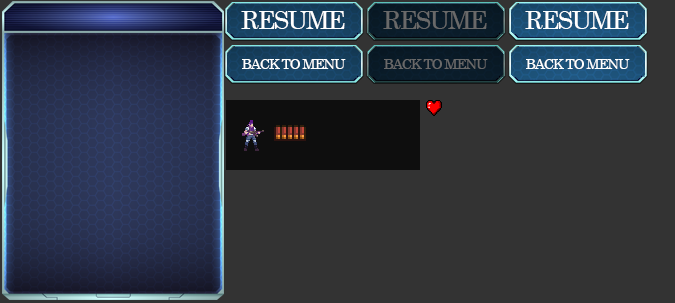
<style>
.page{position:relative;width:675px;height:303px;background:#333333}
.page>*{position:absolute;margin:0}
.t1{font:25px "Century";letter-spacing:-0.075em;color:#ffffff}
.t2{font:25px "Century";letter-spacing:-0.075em;color:#696969}
.t3{font:14px "Century";letter-spacing:-0.075em;color:#ffffff}
.t4{font:14px "Century";letter-spacing:-0.075em;color:#696969}
</style>
<div class="page">
<p class="t1" style="left:241px;top:11px;width:104px;height:18px">RESUME</p>
<p class="t2" style="left:383px;top:11px;width:104px;height:18px">RESUME</p>
<p class="t1" style="left:525px;top:11px;width:104px;height:18px">RESUME</p>
<p class="t3" style="left:242px;top:59px;width:104px;height:10px">BACK TO MENU</p>
<p class="t4" style="left:384px;top:59px;width:104px;height:10px">BACK TO MENU</p>
<p class="t3" style="left:526px;top:59px;width:104px;height:10px">BACK TO MENU</p>
</div>
